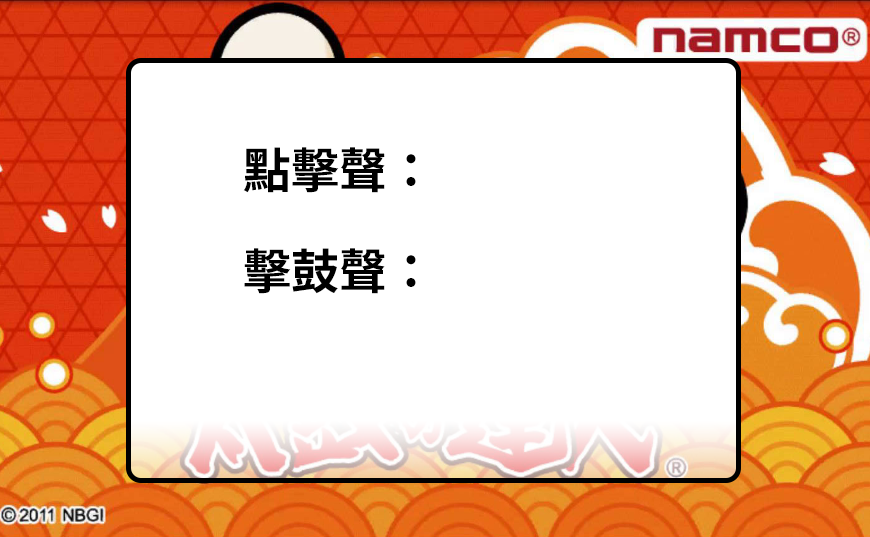
<style>
.page{position:relative;width:870px;height:537px;background:#ffffff}
.page>*{position:absolute;margin:0}
.t1{font:48px "NotoSansHant-Bold";color:#000000}
</style>
<div class="page">
<p class="t1" style="left:243px;top:147px;width:173px;height:46px">點擊聲：</p>
<p class="t1" style="left:244px;top:248px;width:172px;height:46px">擊鼓聲：</p>
</div>
